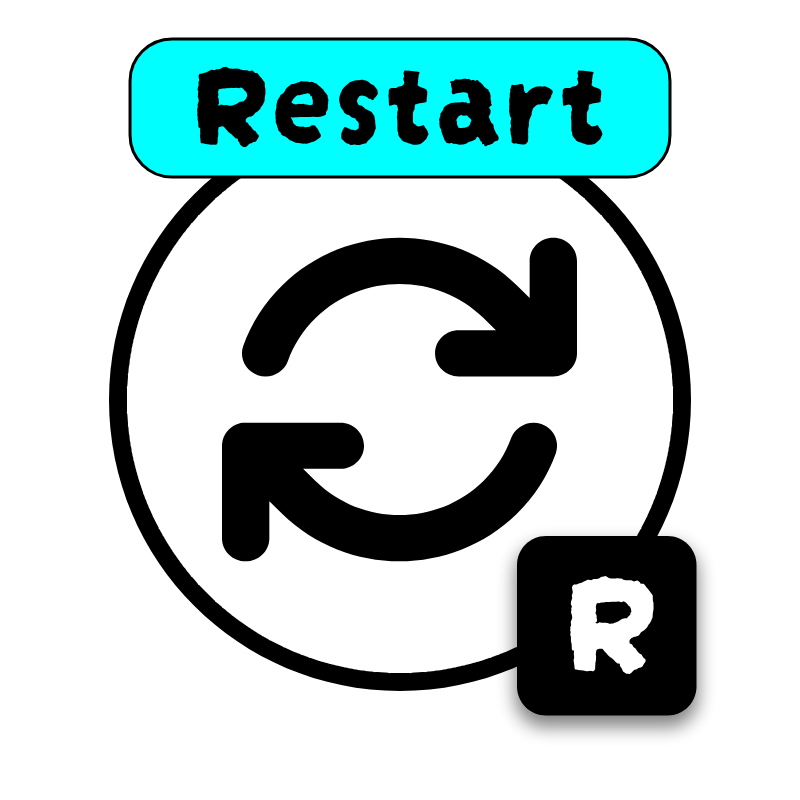
<style>
.page{position:relative;width:800px;height:800px;background:#ffffff}
.page>*{position:absolute;margin:0}
.t1{font:123px "DarumadropOne-Regular";color:#000000}
.t2{font:150px "DarumadropOne-Regular";color:#ffffff}
</style>
<div class="page">
<p class="t1" style="left:197px;top:66px;width:406px;height:82px">Restart</p>
<p class="t2" style="left:570px;top:576px;width:84px;height:98px">R</p>
</div>
